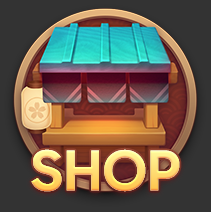
<style>
.page{position:relative;width:211px;height:212px;background:#333333}
.page>*{position:absolute;margin:0}
.t1{font:58.3px "Gabarito-SemiBold"}
</style>
<div class="page">
<p class="t1" style="left:31px;top:149px;width:149px;height:43px">SHOP</p>
<p class="t1" style="left:31px;top:149px;width:149px;height:43px">SHOP</p>
</div>
